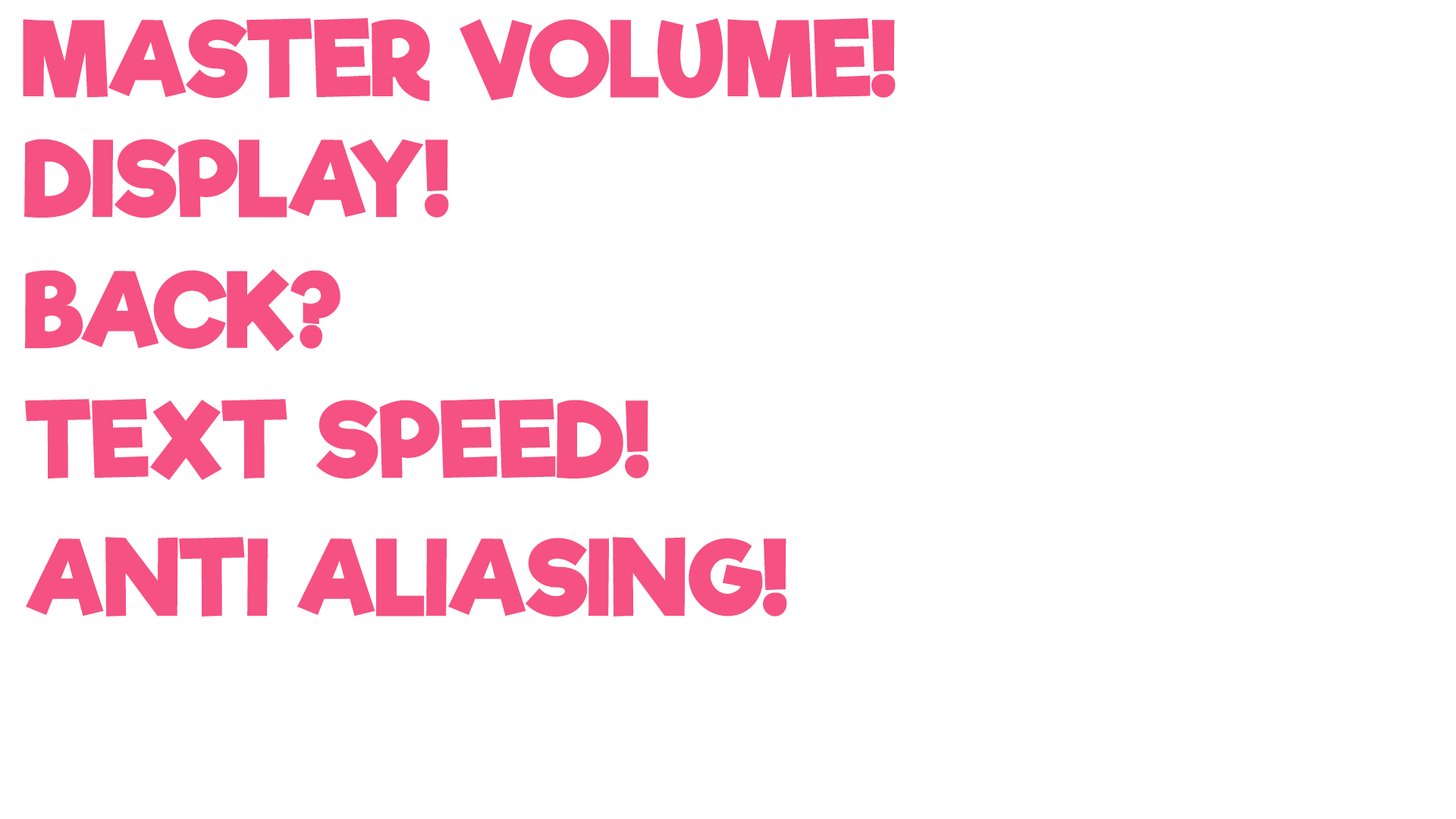
<style>
.page{position:relative;width:1456px;height:819px;background:#ffffff}
.page>*{position:absolute;margin:0}
.t1{font:101.4px "RifficFree-Bold";color:#f55183;text-transform:uppercase}
</style>
<div class="page">
<p class="t1" style="left:23px;top:18px;width:873px;height:84px">Master Volume!</p>
<p class="t1" style="left:24px;top:139px;width:425px;height:79px">Display!</p>
<p class="t1" style="left:25px;top:269px;width:315px;height:83px">Back?</p>
<p class="t1" style="left:25px;top:399px;width:624px;height:81px">Text speed!</p>
<p class="t1" style="left:26px;top:537px;width:761px;height:80px">Anti Aliasing!</p>
</div>
